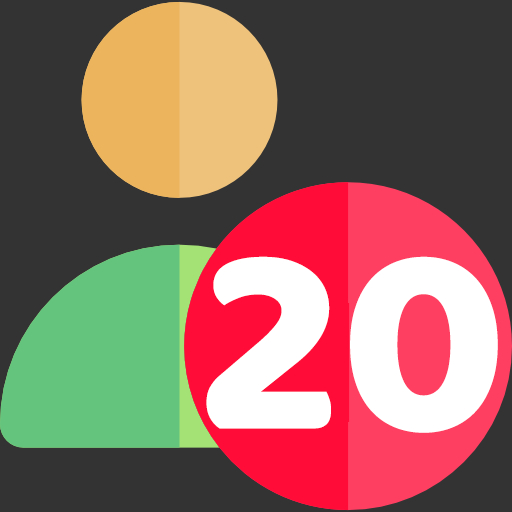
<style>
.page{position:relative;width:512px;height:512px;background:#333333}
.page>*{position:absolute;margin:0}
.t1{font:275px "BalooTamma-Regular";color:#ffffff}
</style>
<div class="page">
<p class="t1" style="left:206px;top:256px;width:292px;height:177px">20</p>
</div>
